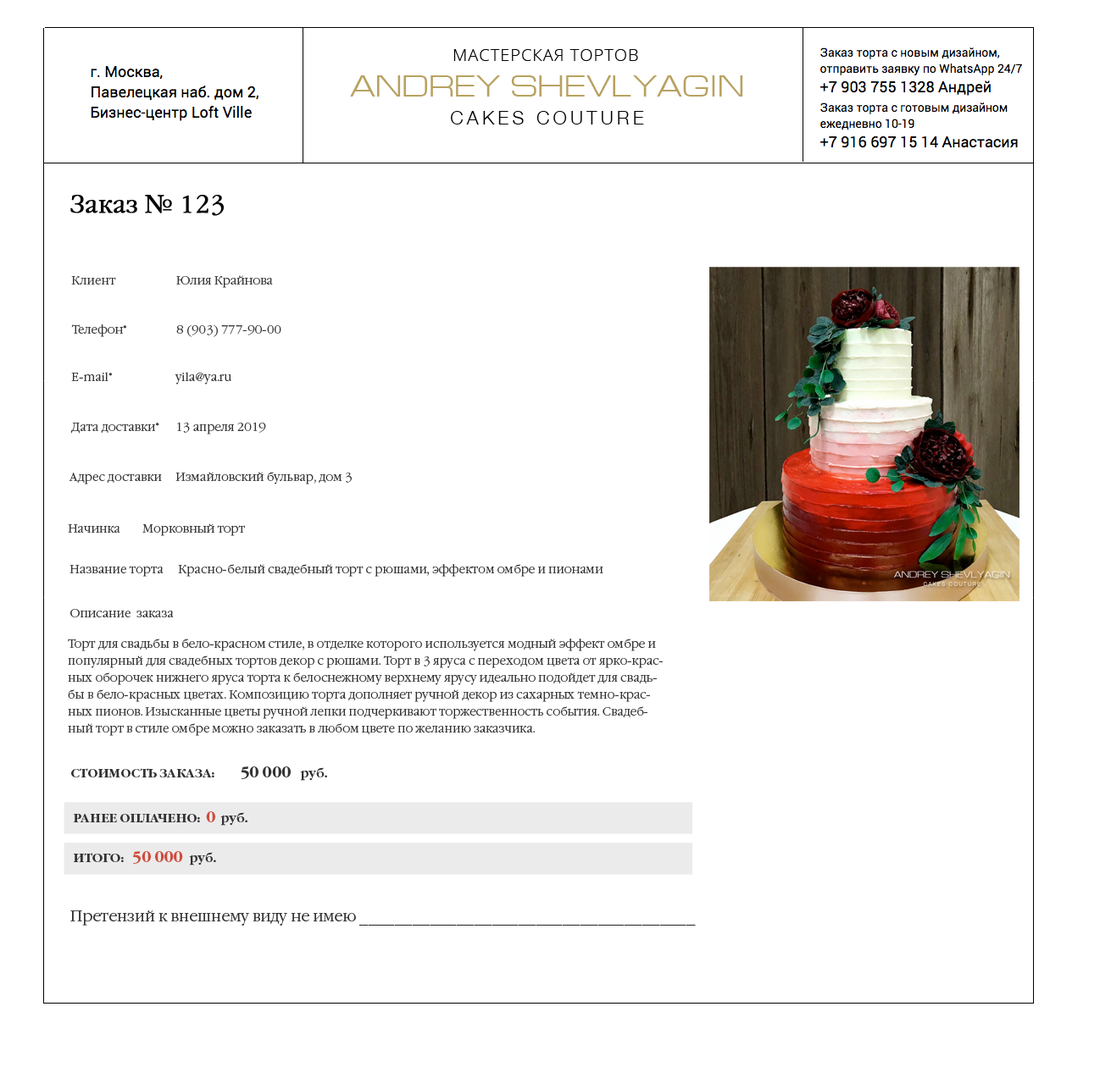
<style>
.page{position:relative;width:1100px;height:1084px;background:#ffffff}
.page>*{position:absolute;margin:0}
.t1{font:24.1px "GaramondC-Light";color:#000000;font-weight:bold}
.t2{font:11.9px "GaramondC-Light";color:#333333}
.t3{font:11.9px/16.9px "GaramondC-Light";color:#333333}
.t4{font:11.9px "GaramondC-Bold";color:#333333}
.t5{font:15.2px "GaramondC-Bold";color:#333333}
.t6{font:15.2px "GaramondC-Bold";color:#ce4c3e}
.t7{font:15.2px "GaramondC-Light";color:#333333}
</style>
<div class="page">
<p class="t1" style="left:70px;top:195px;width:154px;height:21px">Заказ № 123</p>
<p class="t2" style="left:71px;top:275px;width:202px;height:13px">Клиент                      Юлия Крайнова</p>
<p class="t2" style="left:71px;top:324px;width:210px;height:13px">Телефон*                  8 (903) 777-90-00</p>
<p class="t2" style="left:71px;top:372px;width:160px;height:13px">E-mail*                       yila@ya.ru</p>
<p class="t2" style="left:70px;top:422px;width:196px;height:13px">Дата доставки*      13 апреля 2019</p>
<p class="t2" style="left:69px;top:472px;width:283px;height:13px">Адрес доставки     Измайловский бульвар, дом 3</p>
<p class="t2" style="left:68px;top:524px;width:177px;height:12px">Начинка        Морковный торт</p>
<p class="t2" style="left:69px;top:565px;width:95px;height:12px">Название торта</p>
<p class="t2" style="left:178px;top:564px;width:425px;height:13px">Красно-белый свадебный торт с рюшами, эффектом омбре и пионами</p>
<p class="t2" style="left:70px;top:609px;width:104px;height:9px">Описание  заказа</p>
<p class="t3" style="left:68px;top:639px;width:594px;height:97px">Торт для свадьбы в бело-красном стиле, в отделке которого используется модный эффект омбре и популярный для свадебных тортов декор с рюшами. Торт в 3 яруса с переходом цвета от ярко-красных оборочек нижнего яруса торта к белоснежному верхнему ярусу идеально подойдет для свадьбы в бело-красных цветах. Композицию торта дополняет ручной декор из сахарных темно-красных пионов. Изысканные цветы ручной лепки подчеркивают торжественность события. Свадебный торт в стиле омбре можно заказать в любом цвете по желанию заказчика.</p>
<p class="t4" style="left:71px;top:767px;width:256px;height:14px">СТОИМОСТЬ ЗАКАЗА:    <span class="t5">    50 000  </span> руб.</p>
<p class="t4" style="left:73px;top:812px;width:174px;height:14px">РАНЕЕ ОПЛАЧЕНО:  <span class="t6">0</span>  руб.</p>
<p class="t4" style="left:73px;top:851px;width:143px;height:15px">ИТОГО:   <span class="t6">50 000 </span> руб.</p>
<p class="t7" style="left:70px;top:910px;width:626px;height:16px">Претензий к внешнему виду не имею ______________________________________</p>
</div>
